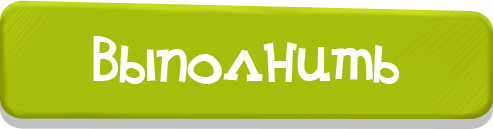
<style>
.page{position:relative;width:493px;height:129px;background:#a7bd0b}
.page>*{position:absolute;margin:0}
.t1{font:62px "DSGoose";color:#ffffff}
</style>
<div class="page">
<p class="t1" style="left:93px;top:36px;width:306px;height:48px">Выполнить</p>
</div>
